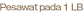
<style>
.page{position:relative;width:83px;height:15px;background:#ffffff}
.page>*{position:absolute;margin:0}
.t1{font:8.7px "GothicMB101Pro-DeBold";letter-spacing:-0.08em;color:#8b6e51}
</style>
<div class="page">
<p class="t1" style="left:0px;top:3px;width:83px;height:9px;opacity:0.9">Pesawat pada 1 LB</p>
</div>
